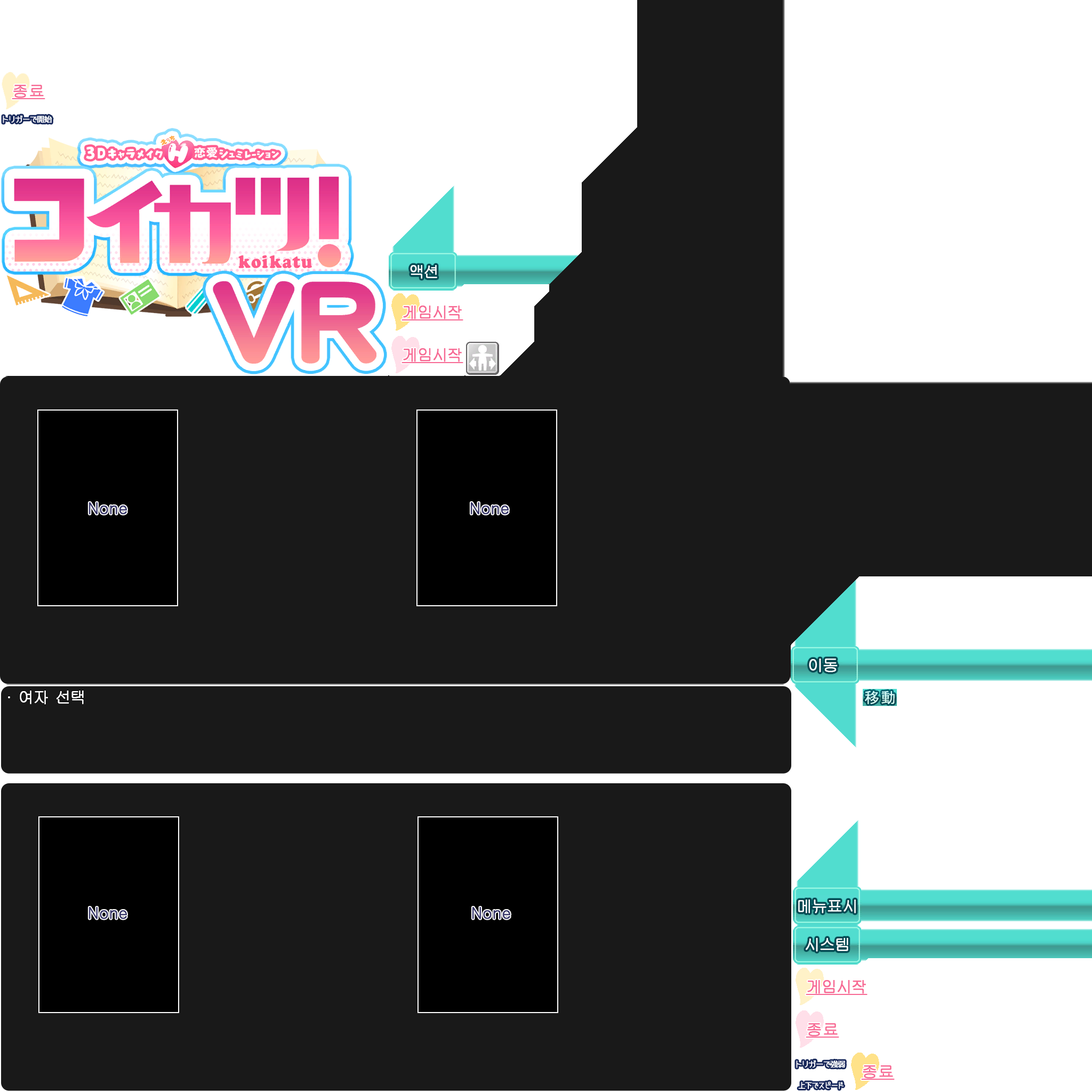
<style>
.page{position:relative;width:1092px;height:1092px;background:#191919}
.page>*{position:absolute;margin:0}
.t1{font:16px "Gulim";color:#f76994;font-weight:bold;text-decoration:underline}
.t2{font:16px "Gulim";color:#ffffff;font-weight:bold}
</style>
<div class="page">
<p class="t1" style="left:12px;top:85px;width:33px;height:14px">종료</p>
<p class="t2" style="left:410px;top:265px;width:27px;height:14px">액션</p>
<p class="t1" style="left:401px;top:306px;width:62px;height:14px">게임시작</p>
<p class="t1" style="left:401px;top:348px;width:62px;height:15px">게임시작</p>
<p class="t2" style="left:809px;top:658px;width:29px;height:14px">이동</p>
<p class="t2" style="left:8px;top:690px;width:76px;height:14px">· 여자 선택</p>
<p class="t2" style="left:798px;top:900px;width:58px;height:13px">메뉴표시</p>
<p class="t2" style="left:806px;top:938px;width:42px;height:14px">시스템</p>
<p class="t1" style="left:806px;top:980px;width:62px;height:15px">게임시작</p>
<p class="t1" style="left:806px;top:1023px;width:33px;height:15px">종료</p>
<p class="t1" style="left:861px;top:1065px;width:34px;height:15px">종료</p>
</div>
